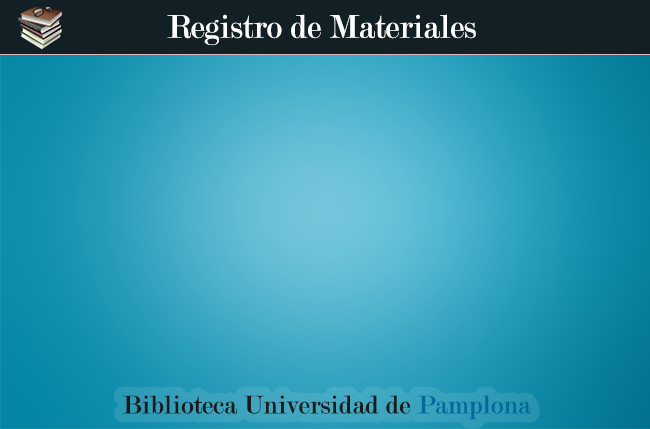
<style>
.page{position:relative;width:650px;height:429px}
.page>*{position:absolute;margin:0}
.t1{font:34.9px "Modern-Regular";color:#ffffff}
.t2{font:27.1px "Modern-Regular";color:#1b1a17}
.t3{font:27.1px "Modern-Regular";color:#006a9c}
</style>
<div class="page">
<p class="t1" style="left:167px;top:14px;width:309px;height:32px">Registro de Materiales</p>
<p class="t2" style="left:122px;top:395px;width:410px;height:25px">Biblioteca Universidad de <span class="t3">Pamplona</span></p>
</div>
